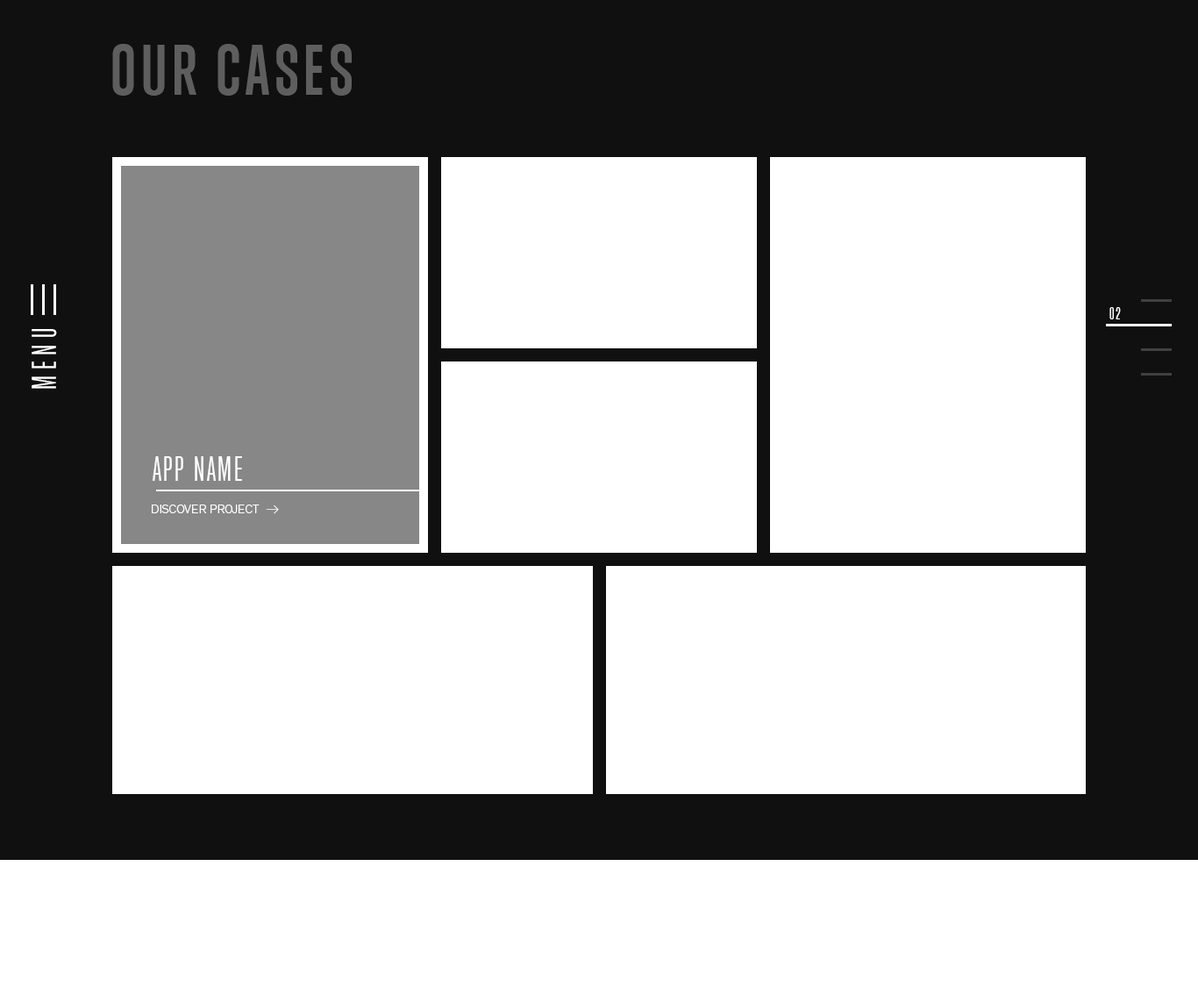
<style>
.page{position:relative;width:1198px;height:995px;background:#ffffff}
.page>*{position:absolute;margin:0}
.t1{font:65.8px "TrumpGothicWest-Bold";letter-spacing:0.075em;color:#5e5e5e;text-transform:uppercase}
.t2{font:15.8px "TrumpGothicWest";letter-spacing:0.1em;color:#ffffff;text-transform:uppercase}
.t3{font:31.6px "TrumpGothicWest";letter-spacing:0.2em;color:#ffffff;text-transform:uppercase}
.t4{font:31.6px "TrumpGothicWest";letter-spacing:0.075em;color:#ffffff;text-transform:uppercase}
.t5{font:12.3px "Theinhardt-Light";color:#ffffff;text-transform:uppercase}
.t6{font:15.8px "Theinhardt-HairlineItalic";letter-spacing:0.075em;color:#ffffff;text-transform:uppercase;font-weight:bold}
</style>
<div class="page">
<p class="t1" style="left:112px;top:44px;width:240px;height:52px">our cases</p>
<p class="t2" style="left:1110px;top:307px;width:11px;height:12px">02</p>
<p class="t3" style="left:32px;top:329px;width:25px;height:60px;rotate:-90deg">menu</p>
<p class="t4" style="left:153px;top:456px;width:89px;height:25px">app name</p>
<p class="t5" style="left:152px;top:504px;width:108px;height:9px">discover project</p>
<p class="t6" style="left:266px;top:505px;width:13px;height:9px">→</p>
</div>
